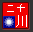
<style>
.page{position:relative;width:33px;height:32px;background:#f20000}
.page>*{position:absolute;margin:0}
.t1{font:10.4px "SimSun";color:#ffffff}
.t2{font:11.7px "SimSun";color:#ffffff}
</style>
<div class="page">
<p class="t1" style="left:7px;top:4px;width:18px;height:8px">二十</p>
<p class="t2" style="left:16px;top:15px;width:11px;height:12px">川</p>
</div>
